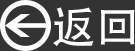
<style>
.page{position:relative;width:135px;height:51px;background:#333333}
.page>*{position:absolute;margin:0}
.t1{font:44.2px "AdobeHeitiStd-Regular";color:#ffffff}
</style>
<div class="page">
<p class="t1" style="left:53px;top:7px;width:82px;height:40px">返回</p>
</div>
